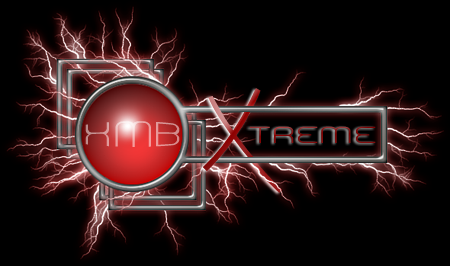
<style>
.page{position:relative;width:450px;height:266px;background:#000000}
.page>*{position:absolute;margin:0}
.t1{font:29px "BNPolice";letter-spacing:0.1em;scale:1.5 1}
.t2{font:24px "BNPolice";letter-spacing:0.1em;scale:1.5 1}
</style>
<div class="page">
<p class="t1" style="left:85px;top:121px;width:95px;height:26px">XMB</p>
<p class="t2" style="left:249px;top:126px;width:127px;height:17px">TREME</p>
</div>
